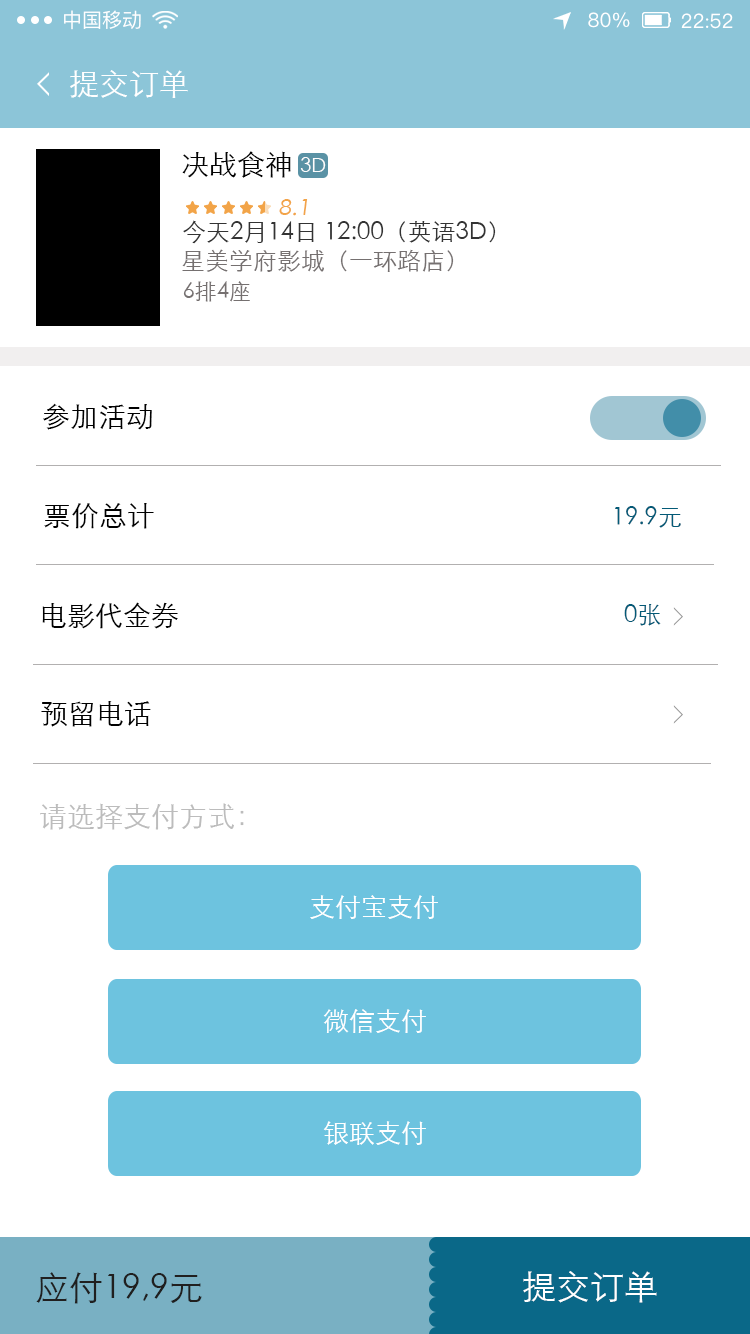
<style>
.page{position:relative;width:750px;height:1334px;background:#ffffff}
.page>*{position:absolute;margin:0}
.t1{font:20px "PingFangSC-Regular";color:#ffffff}
.t2{font:30px "STXihei";color:#ffffff}
.t3{font:28px "STXihei";color:#040404}
.t4{font:20px "STXihei";color:#fffdfd}
.t5{font:22px "STXihei";color:#f2a448;scale:1.06 1}
.t6{font:24px "STXihei";color:#333333}
.t7{font:24px "STXihei";color:#757070}
.t8{font:22px "STXihei";color:#757070}
.t9{font:28px "STXihei";color:#000000}
.t10{font:24px "STXihei";color:#035a77}
.t11{font:28px "STXihei";color:#bcbcbc}
.t12{font:26px "STXihei";color:#ffffff}
.t13{font:34px "STXihei";color:#201f1f}
.t14{font:34px "STXihei";color:#ffffff}
</style>
<div class="page">
<p class="t1" style="left:64px;top:10px;width:77px;height:20px">中国移动</p>
<p class="t1" style="left:588px;top:12px;width:42px;height:16px">80%</p>
<p class="t1" style="left:681px;top:13px;width:52px;height:16px">22:52</p>
<p class="t2" style="left:70px;top:70px;width:118px;height:28px">提交订单</p>
<p class="t3" style="left:182px;top:151px;width:109px;height:27px">决战食神</p>
<p class="t4" style="left:300px;top:157px;width:26px;height:15px">3D</p>
<p class="t5" style="left:279px;top:199px;width:29px;height:17px">8.1</p>
<p class="t6" style="left:183px;top:220px;width:313px;height:24px">今天2月14日 12:00（英语3D）</p>
<p class="t7" style="left:182px;top:249px;width:272px;height:23px">星美学府影城（一环路店）</p>
<p class="t8" style="left:183px;top:281px;width:67px;height:21px">6排4座</p>
<p class="t9" style="left:43px;top:403px;width:109px;height:27px">参加活动</p>
<p class="t9" style="left:44px;top:503px;width:110px;height:26px">票价总计</p>
<p class="t10" style="left:615px;top:506px;width:66px;height:22px">19.9元</p>
<p class="t9" style="left:42px;top:602px;width:136px;height:27px">电影代金券</p>
<p class="t10" style="left:624px;top:604px;width:37px;height:22px">0张</p>
<p class="t9" style="left:41px;top:701px;width:110px;height:26px">预留电话</p>
<p class="t11" style="left:40px;top:803px;width:204px;height:27px">请选择支付方式：</p>
<p class="t12" style="left:310px;top:895px;width:128px;height:24px">支付宝支付</p>
<p class="t12" style="left:323px;top:1009px;width:103px;height:24px">微信支付</p>
<p class="t12" style="left:323px;top:1121px;width:103px;height:24px">银联支付</p>
<p class="t13" style="left:36px;top:1272px;width:166px;height:32px">应付19,9元</p>
<p class="t14" style="left:523px;top:1271px;width:134px;height:32px">提交订单</p>
</div>
